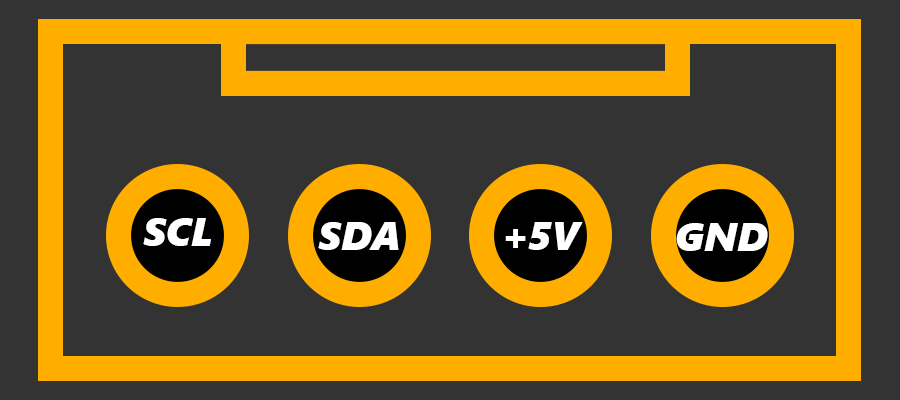
<style>
.page{position:relative;width:900px;height:400px;background:#333333}
.page>*{position:absolute;margin:0}
.t1{font:39.6px "SegoeUIBlack-Italic";color:#ffffff}
</style>
<div class="page">
<p class="t1" style="left:143px;top:218px;width:68px;height:28px">SCL</p>
<p class="t1" style="left:318px;top:222px;width:81px;height:28px">SDA</p>
<p class="t1" style="left:505px;top:222px;width:78px;height:28px">+5V</p>
<p class="t1" style="left:676px;top:223px;width:92px;height:28px">GND</p>
</div>
